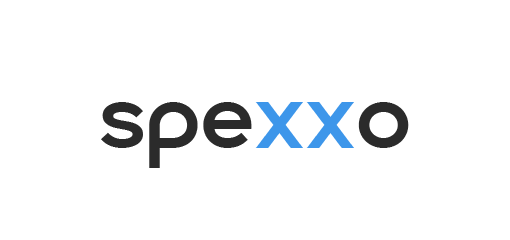
<style>
.page{position:relative;width:510px;height:240px;background:#ffffff}
.page>*{position:absolute;margin:0}
.t1{font:94.8px "DysonSansModern-Regular";color:#2b2b2b}
.t2{font:94.8px "DysonSansModern-Regular";color:#3d96ea}
</style>
<div class="page">
<p class="t1" style="left:101px;top:102px;width:308px;height:66px">spe<span class="t2">xx</span>o</p>
</div>
